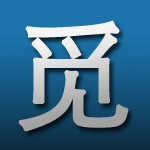
<style>
.page{position:relative;width:150px;height:150px}
.page>*{position:absolute;margin:0}
.t1{font:120px "STXihei";font-weight:bold}
</style>
<div class="page">
<p class="t1" style="left:18px;top:20px;width:111px;height:112px">觅</p>
</div>
